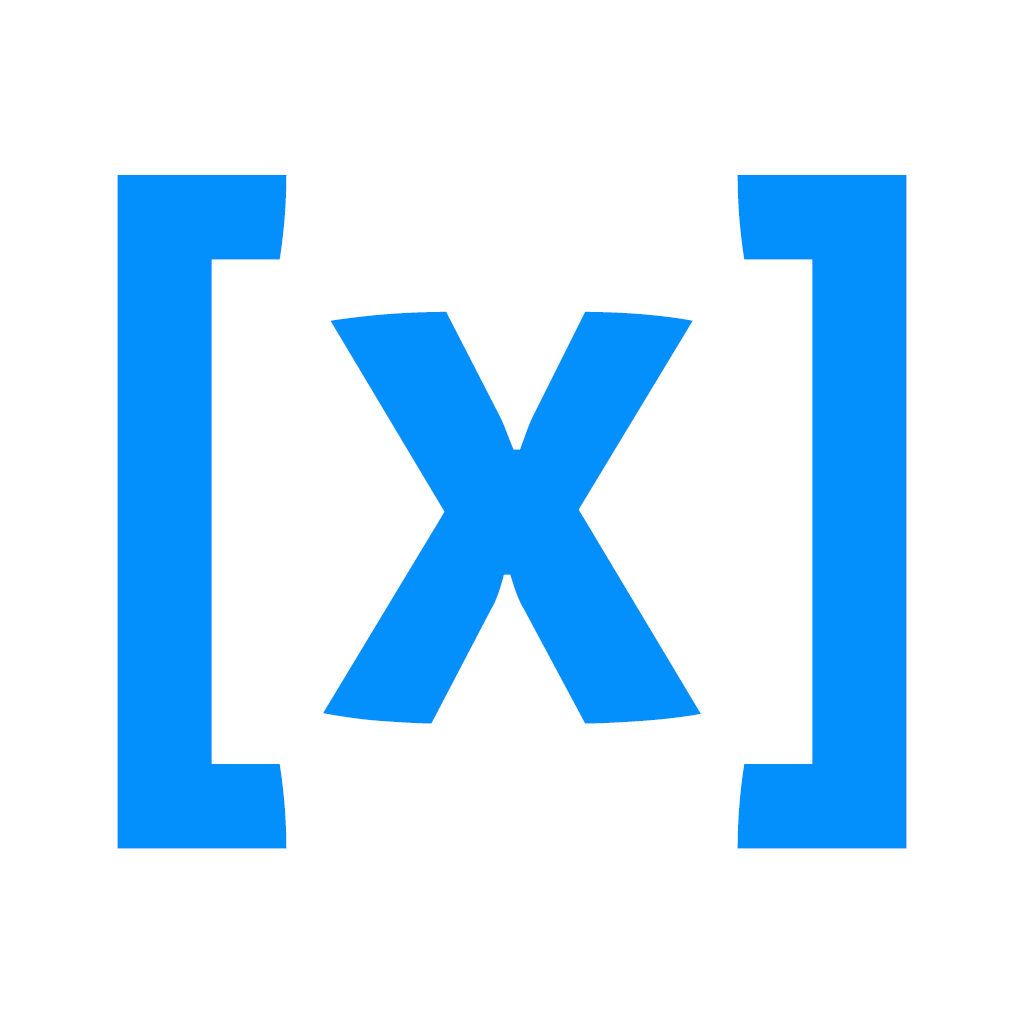
<style>
.page{position:relative;width:1024px;height:1024px;background:#ffffff}
.page>*{position:absolute;margin:0}
.t1{font:740.1px "VistaSansSCBold";color:#0390fc}
</style>
<div class="page">
<p class="t1" style="left:117px;top:175px;width:790px;height:674px">[x]</p>
</div>
